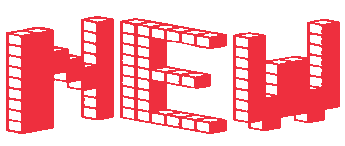
<style>
.page{position:relative;width:345px;height:146px;background:#ffffff}
.page>*{position:absolute;margin:0}
.t1{font:121.3px "Blox-(BRK";color:#ee2f3e;scale:1.87 1}
</style>
<div class="page">
<p class="t1" style="left:6px;top:16px;width:334px;height:118px">nEw</p>
</div>
